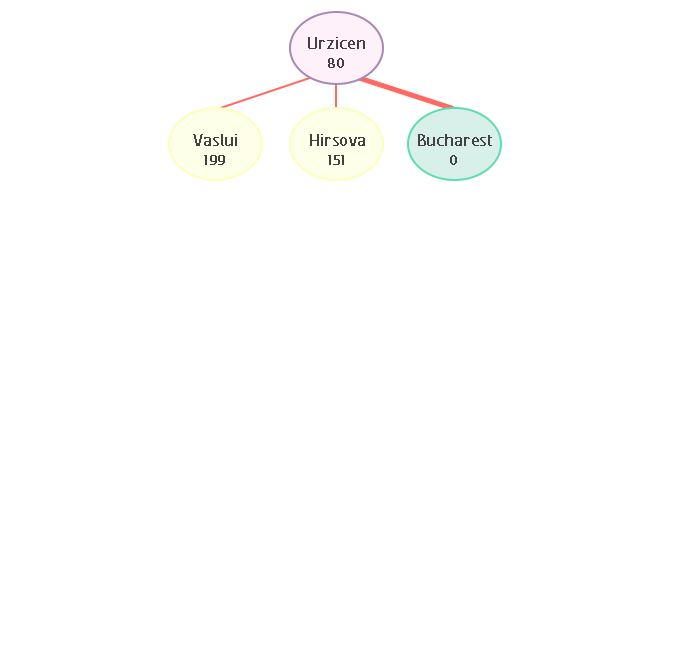
<style>
.page{position:relative;width:674px;height:660px;background:#ffffff}
.page>*{position:absolute;margin:0}
.t1{font:20.8px "FCActiveRegular";color:#424242;font-weight:bold}
.t2{font:16.7px "FCActiveRegular";color:#424141;font-weight:bold}
</style>
<div class="page">
<p class="t1" style="left:308px;top:37px;width:57px;height:12px">Urzicen</p>
<p class="t2" style="left:328px;top:58px;width:16px;height:10px">80</p>
<p class="t1" style="left:193px;top:134px;width:44px;height:12px">Vaslui</p>
<p class="t1" style="left:310px;top:134px;width:55px;height:12px">Hirsova</p>
<p class="t1" style="left:418px;top:134px;width:74px;height:12px">Bucharest</p>
<p class="t2" style="left:204px;top:155px;width:21px;height:10px">199</p>
<p class="t2" style="left:328px;top:155px;width:16px;height:10px">151</p>
<p class="t2" style="left:450px;top:155px;width:7px;height:10px">0</p>
</div>
